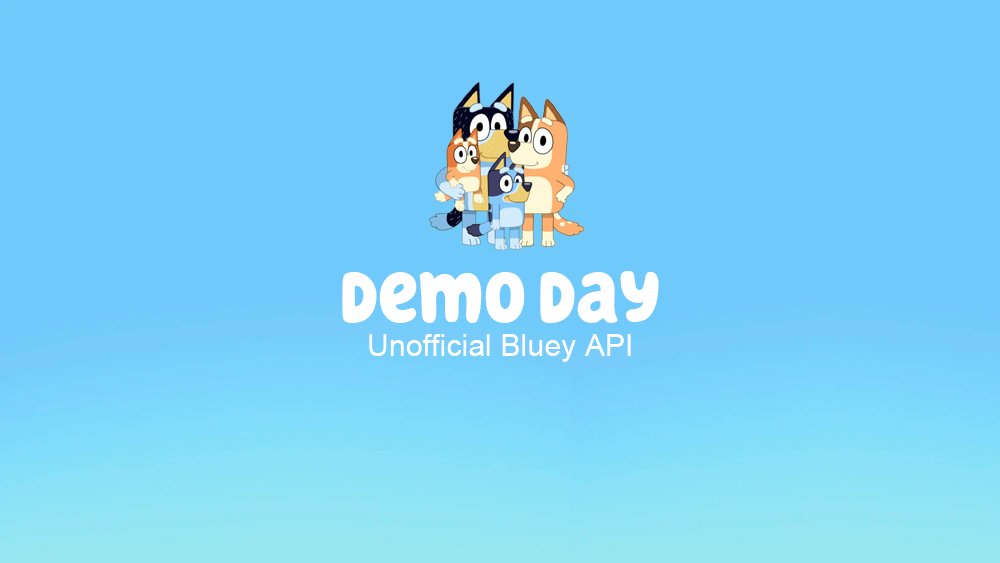
<style>
.page{position:relative;width:1000px;height:563px}
.page>*{position:absolute;margin:0}
.t1{font:72px "HelloHeadlineW00-Regular";letter-spacing:0.005em;color:#ffffff}
.t2{font:30px "ArialMT";letter-spacing:0.005em;color:#ffffff}
</style>
<div class="page">
<p class="t1" style="left:342px;top:271px;width:317px;height:52px">demo day</p>
<p class="t2" style="left:369px;top:334px;width:262px;height:28px">Unofficial Bluey API</p>
</div>
